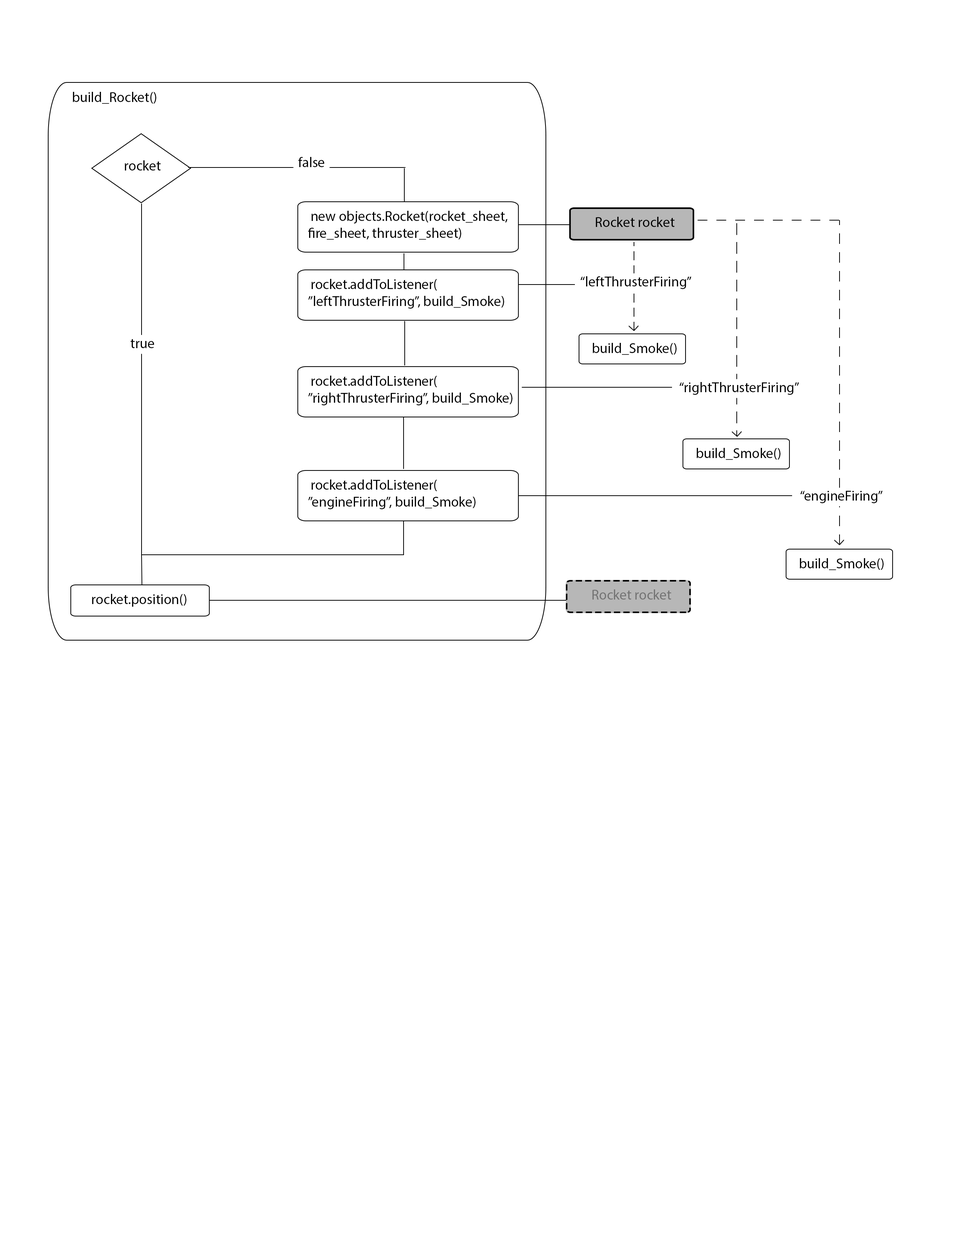
<style>
.page{position:relative;width:960px;height:1242px;background:#ffffff}
.page>*{position:absolute;margin:0}
.t1{font:14.1px "MyriadPro-Regular";color:#000000}
.t2{font:14.1px "MyriadPro-Regular";color:#737373}
</style>
<div class="page">
<p class="t1" style="left:73px;top:92px;width:83px;height:12px">build_Rocket()</p>
<p class="t1" style="left:125px;top:160px;width:36px;height:11px">rocket</p>
<p class="t1" style="left:298px;top:157px;width:26px;height:10px">false</p>
<p class="t1" style="left:308px;top:211px;width:199px;height:29px">new objects.Rocket(rocket_sheet,<br>fire_sheet, thruster_sheet)</p>
<p class="t1" style="left:596px;top:217px;width:79px;height:10px">Rocket rocket</p>
<p class="t1" style="left:308px;top:279px;width:196px;height:30px">rocket.addToListener(<br>”leftThrusterFiring”, build_Smoke)</p>
<p class="t1" style="left:580px;top:276px;width:112px;height:13px">“leftThrusterFiring”</p>
<p class="t1" style="left:131px;top:339px;width:23px;height:9px">true</p>
<p class="t1" style="left:593px;top:343px;width:83px;height:12px">build_Smoke()</p>
<p class="t1" style="left:308px;top:376px;width:204px;height:29px">rocket.addToListener(<br>”rightThrusterFiring”, build_Smoke)</p>
<p class="t1" style="left:679px;top:382px;width:120px;height:13px">“rightThrusterFiring”</p>
<p class="t1" style="left:696px;top:448px;width:84px;height:12px">build_Smoke()</p>
<p class="t1" style="left:308px;top:480px;width:167px;height:29px">rocket.addToListener(<br>”engineFiring”, build_Smoke)</p>
<p class="t1" style="left:800px;top:491px;width:83px;height:12px">“engineFiring”</p>
<p class="t1" style="left:800px;top:558px;width:83px;height:12px">build_Smoke()</p>
<p class="t2" style="left:592px;top:589px;width:79px;height:11px">Rocket rocket</p>
<p class="t1" style="left:92px;top:594px;width:94px;height:13px">rocket.position()</p>
</div>
